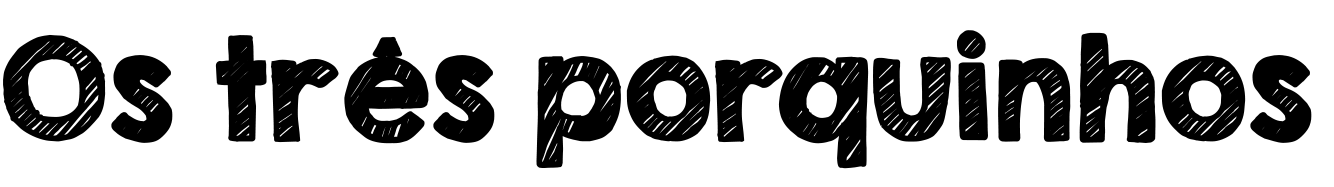
<style>
.page{position:relative;width:1334px;height:187px;background:#ffffff}
.page>*{position:absolute;margin:0}
.t1{font:125px "KGSecondChancesSketch";color:#000000;font-weight:bold}
</style>
<div class="page">
<p class="t1" style="left:3px;top:30px;width:1309px;height:139px">Os três porquinhos</p>
</div>
